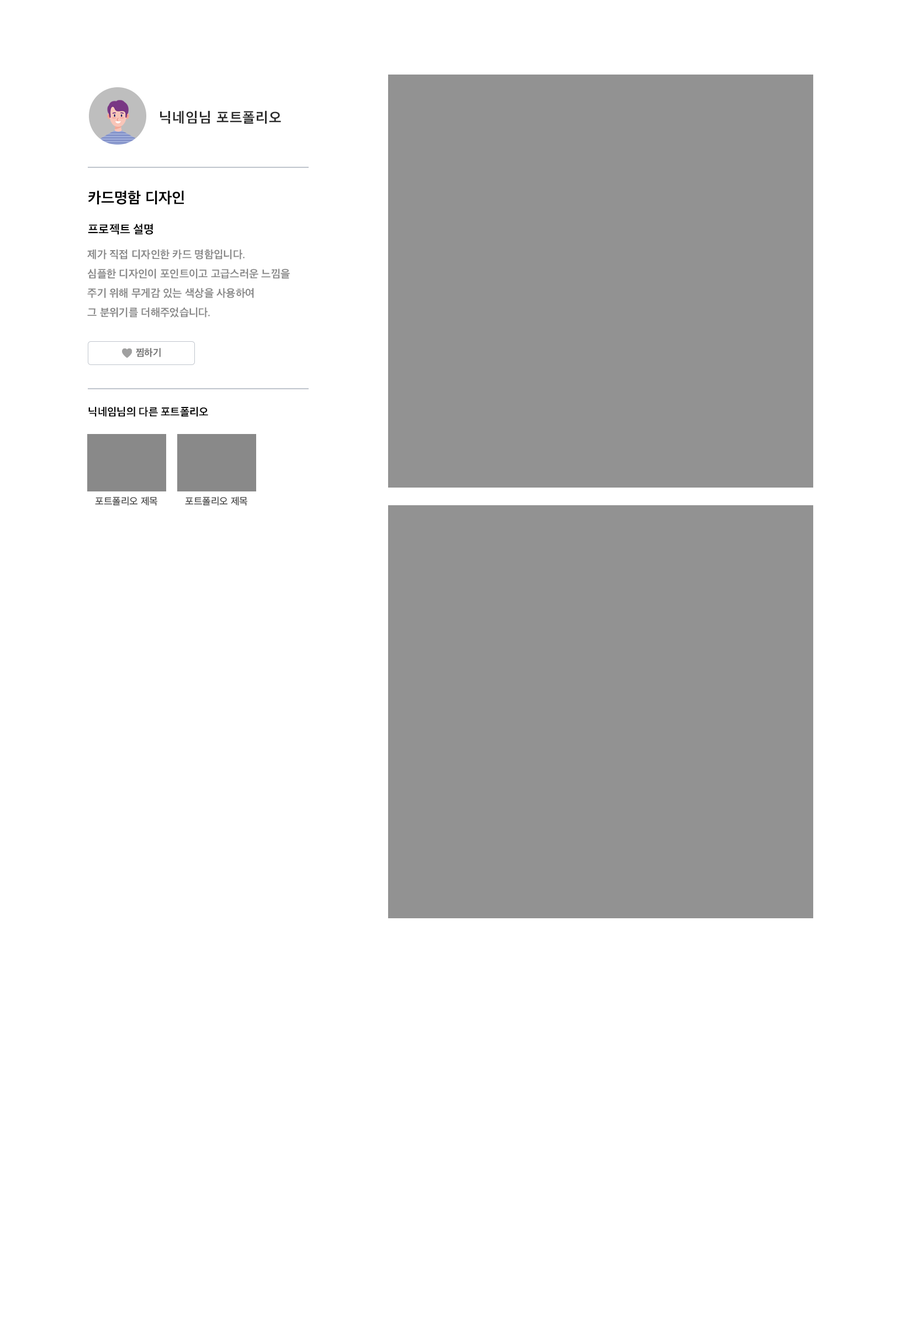
<style>
.page{position:relative;width:901px;height:1323px;background:#ffffff}
.page>*{position:absolute;margin:0}
.t1{font:14.4px "AppleSDGothicNeo-Bold";letter-spacing:0.05em;color:#2c2c2c}
.t2{font:15.5px "AppleSDGothicNeo-Bold";color:#000000}
.t3{font:12.1px "AppleSDGothicNeo-Bold";color:#000000}
.t4{font:11px "AppleSDGothicNeo-Bold";color:#898989}
.t5{font:9.9px "AppleSDGothicNeo-Bold";color:#787878}
.t6{font:11px "AppleSDGothicNeo-Bold";color:#000000}
.t7{font:9.9px "AppleSDGothicNeo-Regular";color:#3c3c3c}
</style>
<div class="page">
<p class="t1" style="left:160px;top:110px;width:121px;height:14px">닉네임님 포트폴리오</p>
<p class="t2" style="left:88px;top:191px;width:96px;height:14px">카드명함 디자인</p>
<p class="t3" style="left:88px;top:224px;width:65px;height:11px">프로젝트 설명</p>
<p class="t4" style="left:87px;top:249px;width:203px;height:69px">제가 직접 디자인한 카드 명함입니다.<br>심플한 디자인이 포인트이고 고급스러운 느낌을<br>주기 위해 무게감 있는 색상을 사용하여 <br>그 분위기를 더해주었습니다.</p>
<p class="t5" style="left:136px;top:348px;width:25px;height:9px">찜하기</p>
<p class="t6" style="left:88px;top:406px;width:120px;height:11px">닉네임님의 다른 포트폴리오</p>
<p class="t7" style="left:95px;top:496px;width:62px;height:10px">포트폴리오 제목</p>
<p class="t7" style="left:185px;top:496px;width:62px;height:10px">포트폴리오 제목</p>
</div>
